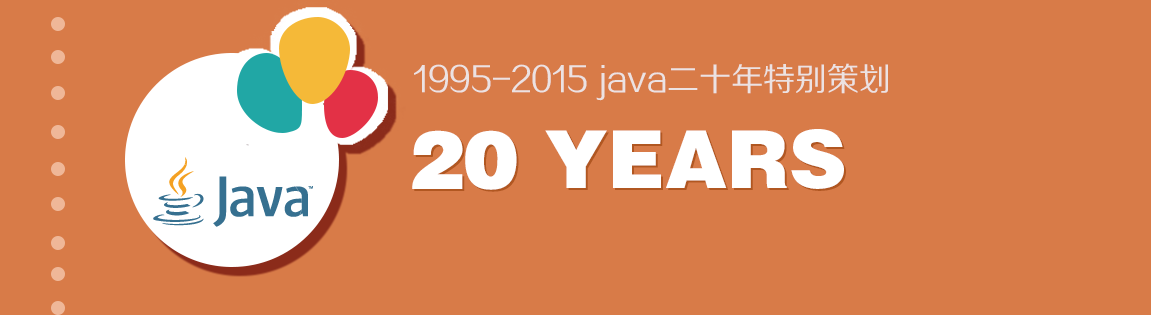
<style>
.page{position:relative;width:1151px;height:315px;background:#d87b48}
.page>*{position:absolute;margin:0}
.t1{font:32px "FZZHJW--GB1-0";color:#ece2e2}
.t2{font:80px "FZCCHJW--GB1-0";color:#ffffff}
.t3{font:80px "FZCCHJW--GB1-0";color:#ffffff;font-weight:bold}
</style>
<div class="page">
<p class="t1" style="left:414px;top:63px;width:474px;height:38px">1995-2015 java二十年特别策划</p>
<p class="t2" style="left:412px;top:129px;width:432px;height:61px"><span class="t3">20</span> YEARS</p>
<p class="t2" style="left:414px;top:131px;width:432px;height:61px"><span class="t3">20</span> YEARS</p>
</div>
